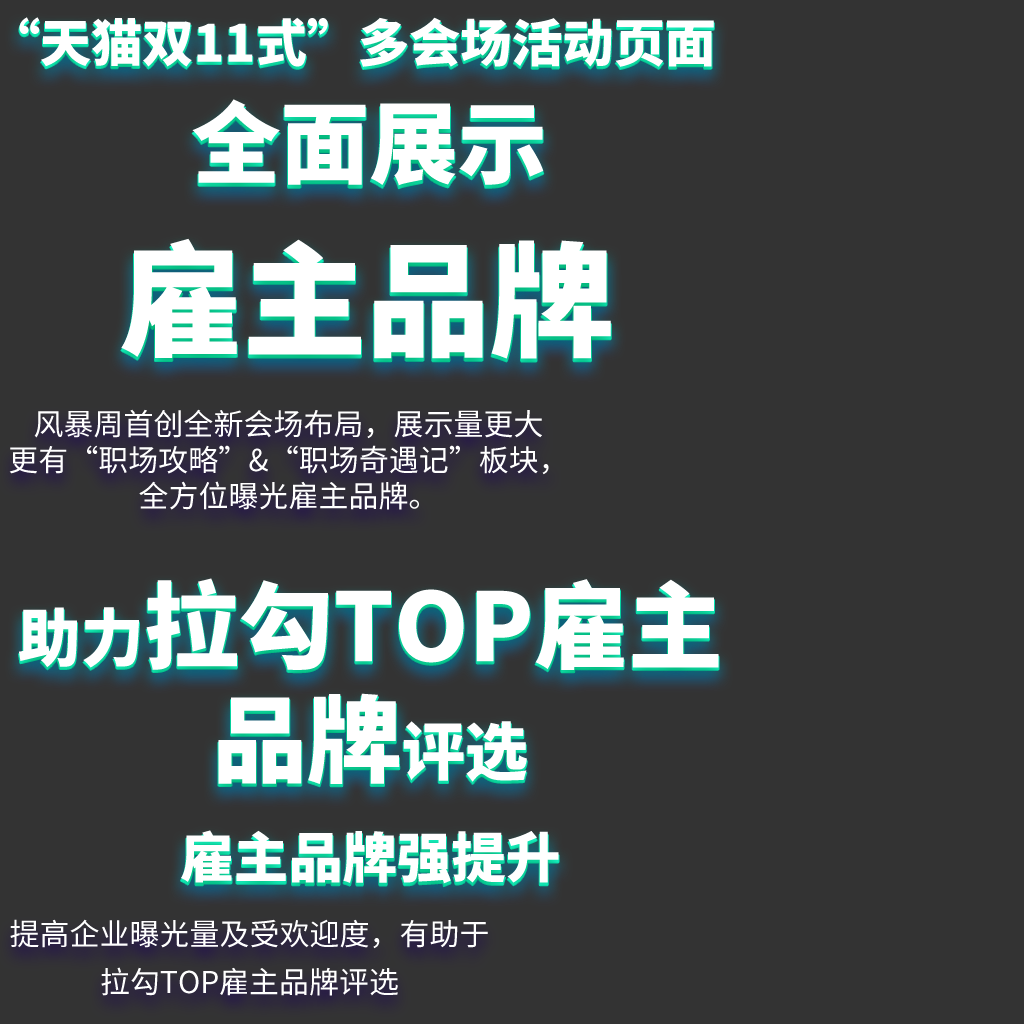
<style>
.page{position:relative;width:1024px;height:1024px;background:#333333}
.page>*{position:absolute;margin:0}
.t1{font:51.2px "SourceHanSansCN-Heavy";color:#ffffff}
.t2{font:89.1px "SourceHanSansCN-Heavy";color:#ffffff}
.t3{font:123.8px "SourceHanSansCN-Heavy";color:#ffffff}
.t4{font:99.1px "SourceHanSansCN-Heavy";color:#ffffff}
.t5{font:30px "SourceHanSansCN-Regular";color:#ffffff}
.t6{font:94.7px "SourceHanSansCN-Heavy";color:#ffffff}
.t7{font:63.2px "SourceHanSansCN-Heavy";color:#ffffff}
.t8{font:54.4px "SourceHanSansCN-Heavy";color:#ffffff}
.t9{font:30px/48px "SourceHanSansCN-Regular";color:#ffffff}
</style>
<div class="page">
<p class="t1" style="left:19px;top:17px;width:695px;height:50px">“天猫双11式”多会场活动页面</p>
<p class="t1" style="left:19px;top:19px;width:695px;height:50px">“天猫双11式”多会场活动页面</p>
<p class="t2" style="left:192px;top:102px;width:352px;height:87px">全面展示</p>
<p class="t2" style="left:192px;top:99px;width:352px;height:87px">全面展示</p>
<p class="t3" style="left:121px;top:241px;width:490px;height:121px"><span class="t4"><br></span>雇主品牌</p>
<p class="t3" style="left:121px;top:238px;width:490px;height:121px"><span class="t4"><br></span>雇主品牌</p>
<p class="t5" style="left:9px;top:409px;width:540px;height:101px;text-align:center">风暴周首创全新会场布局，展示量更大<br>更有“职场攻略”&amp;“职场奇遇记”板块，<br>全方位曝光雇主品牌。</p>
<p class="t6" style="left:19px;top:580px;width:700px;height:207px;text-align:center"><span class="t7">助力</span>拉勾TOP雇主<br>品牌<span class="t7">评选</span></p>
<p class="t6" style="left:19px;top:578px;width:700px;height:206px;text-align:center"><span class="t7">助力</span>拉勾TOP雇主<br>品牌<span class="t7">评选</span></p>
<p class="t8" style="left:181px;top:833px;width:378px;height:54px">雇主品牌强提升</p>
<p class="t8" style="left:181px;top:830px;width:378px;height:54px">雇主品牌强提升</p>
<p class="t9" style="left:10px;top:919px;width:478px;height:77px;text-align:center">提高企业曝光量及受欢迎度，有助于<br>拉勾TOP雇主品牌评选</p>
</div>
